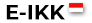
<style>
.page{position:relative;width:92px;height:23px;background:#ffffff}
.page>*{position:absolute;margin:0}
.t1{font:20.6px "Montserrat-Bold";color:#000000}
</style>
<div class="page">
<p class="t1" style="left:6px;top:5px;width:59px;height:15px">E-IKK</p>
</div>
